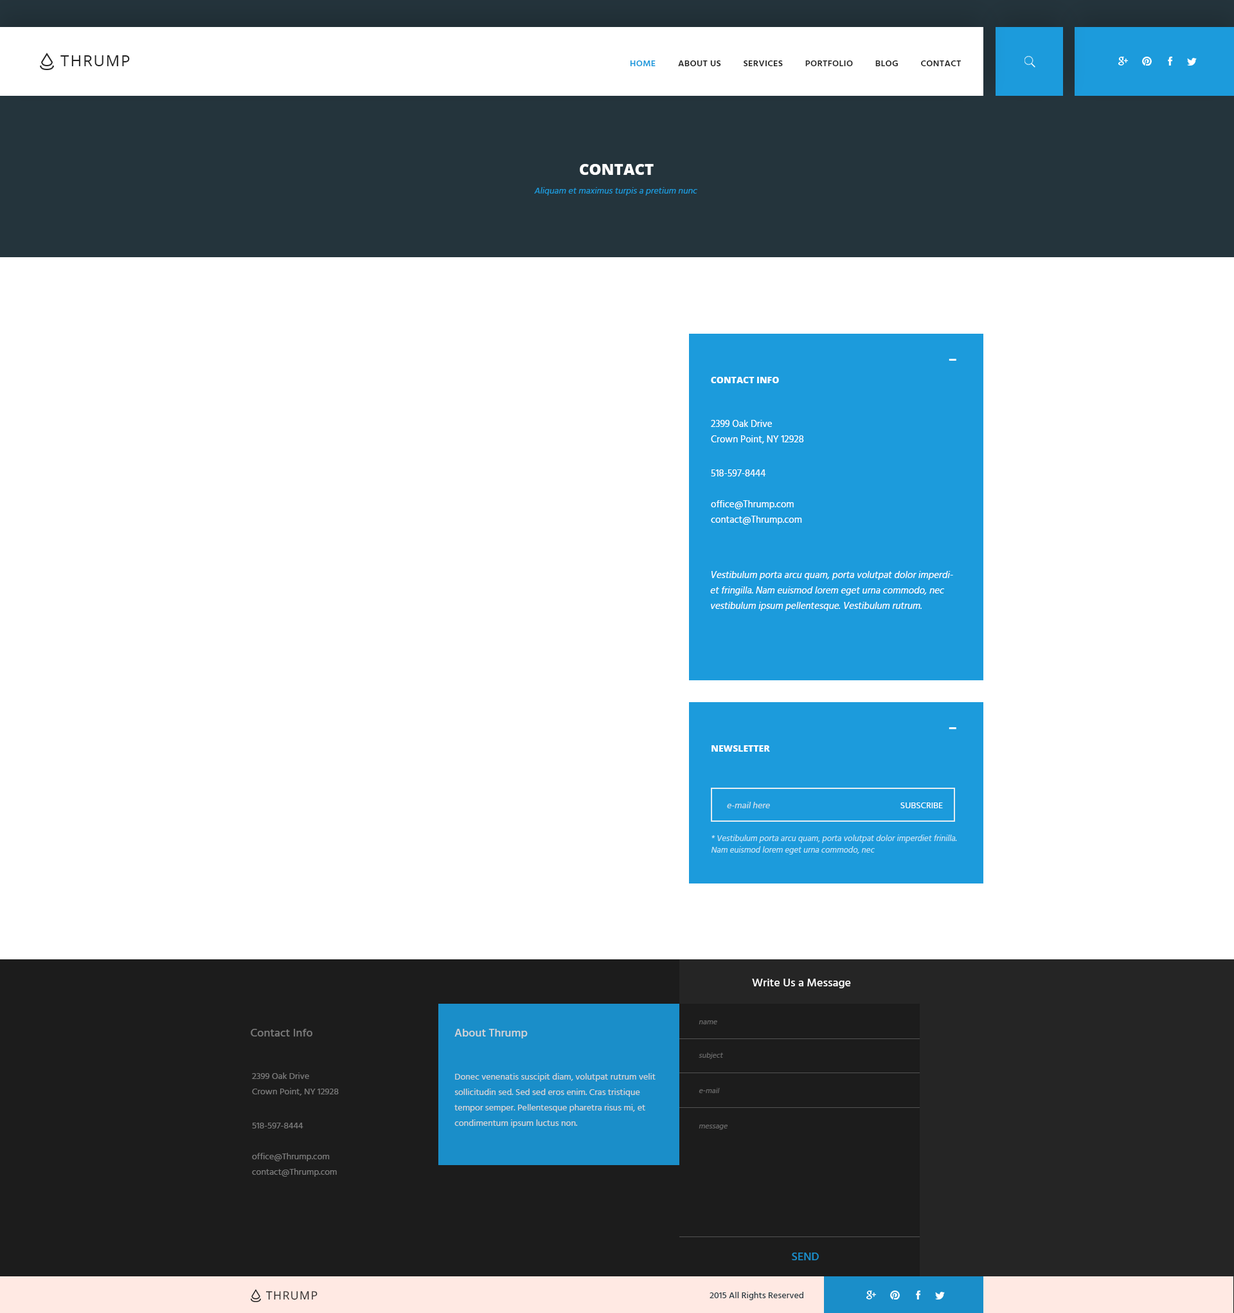
<style>
.page{position:relative;width:1234px;height:1313px;background:#ffffff}
.page>*{position:absolute;margin:0}
.t1{font:15.4px "OpenSans";letter-spacing:0.075em;color:#252525;text-transform:uppercase}
.t2{font:9px "Hind-Semibold";letter-spacing:0.025em;color:#252525;text-transform:uppercase}
.t3{font:9px "Hind-Semibold";letter-spacing:0.025em;color:#1c9bdc;text-transform:uppercase}
.t4{font:15.4px "OpenSans-Extrabold";color:#ffffff;text-transform:uppercase}
.t5{font:9px "Hind-Regular";color:#1c9bdc;font-style:italic}
.t6{font:30.9px "Hind-Light";color:#ffffff}
.t7{font:9px "OpenSans-Extrabold";color:#ffffff;text-transform:uppercase}
.t8{font:9.6px/15.4px "Hind-Regular";color:#ffffff}
.t9{font:9.6px "Hind-Regular";color:#ffffff}
.t10{font:9.6px/15.4px "Hind-Regular";color:#ffffff;font-style:italic}
.t11{font:9px "Hind-Regular";color:#cee1eb;font-style:italic}
.t12{font:9px "Hind-Regular";color:#ffffff;text-transform:uppercase}
.t13{font:8.4px/11.6px "Hind-Regular";color:#c2e4f5;font-style:italic}
.t14{font:11.6px "Hind-Medium";color:#ffffff}
.t15{font:7.7px "Hind-Regular";color:#686868;font-style:italic}
.t16{font:11.6px "Hind-Medium";color:#7b7b7b}
.t17{font:11.6px "Hind-Medium";color:#d6d6d6}
.t18{font:9px/15.4px "Hind-Regular";color:#7b7b7b}
.t19{font:9px/15.4px "Hind-Regular";color:#d6d6d6}
.t20{font:9px "Hind-Regular";color:#7b7b7b}
.t21{font:11.6px "Hind-Medium";color:#1a8ec9}
.t22{font:11.4px "OpenSans";letter-spacing:0.075em;color:#252525;text-transform:uppercase}
.t23{font:9px "Hind-Medium";color:#273941}
</style>
<div class="page">
<p class="t1" style="left:60px;top:55px;width:70px;height:11px">Thrump</p>
<p class="t2" style="left:630px;top:60px;width:332px;height:6px"><span class="t3">Home</span>         About Us         Services         Portfolio         Blog         Contact</p>
<p class="t4" style="left:580px;top:164px;width:74px;height:11px">contact</p>
<p class="t5" style="left:534px;top:187px;width:164px;height:8px">Aliquam et maximus turpis a pretium nunc</p>
<p class="t6" style="left:949px;top:359px;width:8px;height:2px">-</p>
<p class="t7" style="left:711px;top:377px;width:68px;height:6px">Contact Info</p>
<p class="t8" style="left:711px;top:420px;width:93px;height:24px">2399 Oak Drive<br>Crown Point, NY 12928</p>
<p class="t9" style="left:711px;top:469px;width:55px;height:7px">518-597-8444</p>
<p class="t8" style="left:711px;top:500px;width:91px;height:25px">office@Thrump.com<br>contact@Thrump.com</p>
<p class="t10" style="left:710px;top:571px;width:243px;height:40px">Vestibulum porta arcu quam, porta volutpat dolor imperdiet fringilla. Nam euismod lorem eget urna commodo, nec vestibulum ipsum pellentesque. Vestibulum rutrum.</p>
<p class="t6" style="left:949px;top:727px;width:8px;height:2px">-</p>
<p class="t7" style="left:712px;top:745px;width:58px;height:7px">Newsletter</p>
<p class="t11" style="left:727px;top:802px;width:43px;height:6px">e-mail here</p>
<p class="t12" style="left:901px;top:802px;width:42px;height:6px">Subscribe</p>
<p class="t13" style="left:711px;top:834px;width:246px;height:20px">* Vestibulum porta arcu quam, porta volutpat dolor imperdiet frinilla.  Nam euismod lorem eget urna commodo, nec</p>
<p class="t14" style="left:752px;top:978px;width:99px;height:10px">Write Us a Message</p>
<p class="t15" style="left:699px;top:1020px;width:18px;height:4px">name</p>
<p class="t16" style="left:251px;top:1029px;width:61px;height:7px">Contact Info</p>
<p class="t17" style="left:455px;top:1029px;width:73px;height:9px">About Thrump</p>
<p class="t15" style="left:699px;top:1052px;width:24px;height:7px">subject</p>
<p class="t18" style="left:252px;top:1072px;width:87px;height:23px">2399 Oak Drive<br>Crown Point, NY 12928</p>
<p class="t19" style="left:455px;top:1073px;width:201px;height:55px">Donec venenatis suscipit diam, volutpat rutrum velit sollicitudin sed. Sed sed eros enim. Cras tristique tempor semper. Pellentesque pharetra risus mi, et condimentum ipsum luctus non.</p>
<p class="t15" style="left:699px;top:1088px;width:21px;height:5px">e-mail</p>
<p class="t20" style="left:252px;top:1122px;width:51px;height:6px">518-597-8444</p>
<p class="t15" style="left:699px;top:1124px;width:29px;height:6px">message</p>
<p class="t18" style="left:252px;top:1153px;width:85px;height:23px">office@Thrump.com<br>contact@Thrump.com</p>
<p class="t21" style="left:792px;top:1252px;width:27px;height:8px">SEND</p>
<p class="t22" style="left:266px;top:1291px;width:52px;height:9px">Thrump</p>
<p class="t23" style="left:710px;top:1292px;width:94px;height:8px">2015 All Rights Reserved</p>
</div>
